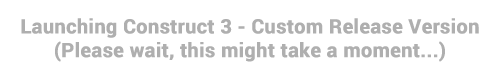
<style>
.page{position:relative;width:500px;height:80px;background:#ffffff}
.page>*{position:absolute;margin:0}
.t1{font:19.7px/23.7px "Roboto-Bold";color:#afafaf;font-weight:bold}
</style>
<div class="page">
<p class="t1" style="left:21px;top:18px;width:458px;height:44px;text-align:center">Launching Construct 3 - Custom Release Version<br>(Please wait, this might take a moment...)</p>
</div>
